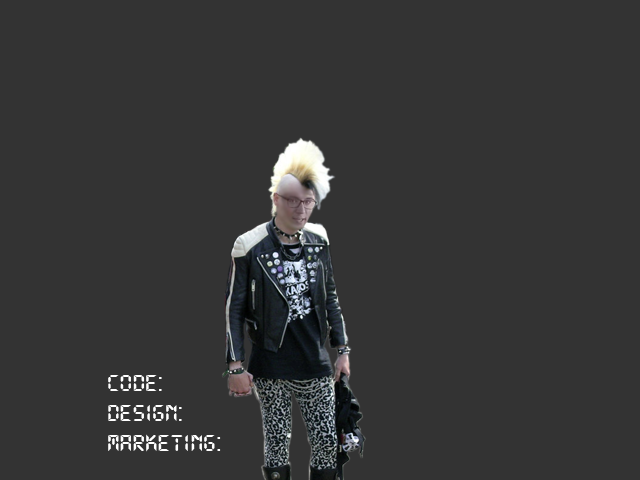
<style>
.page{position:relative;width:640px;height:480px;background:#333333}
.page>*{position:absolute;margin:0}
.t1{font:25px "DS-Digital-Bold";color:#ffffff}
</style>
<div class="page">
<p class="t1" style="left:108px;top:375px;width:113px;height:77px">CODE:<br>DESIGN:<br>MARKETING:</p>
</div>
